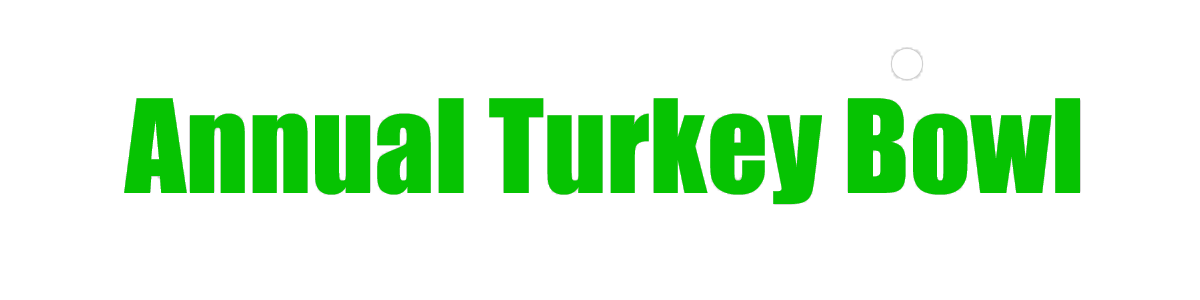
<style>
.page{position:relative;width:1200px;height:300px;background:#ffffff}
.page>*{position:absolute;margin:0}
.t1{font:120px "Impact";color:#06c302}
</style>
<div class="page">
<p class="t1" style="left:124px;top:98px;width:956px;height:106px">Annual Turkey Bowl</p>
</div>
